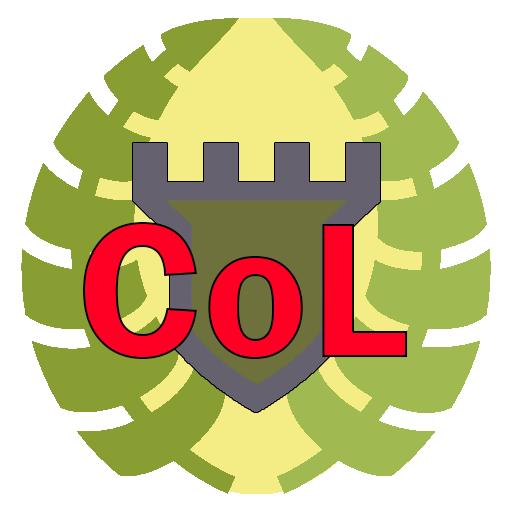
<style>
.page{position:relative;width:512px;height:512px;background:#ffffff}
.page>*{position:absolute;margin:0}
.t1{font:200px "FranklinGothic-Demi";color:#ff0024}
</style>
<div class="page">
<p class="t1" style="left:83px;top:222px;width:325px;height:137px">CoL</p>
</div>
